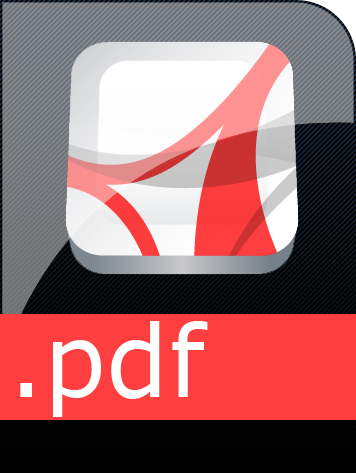
<style>
.page{position:relative;width:356px;height:473px;background:#ff3f3f}
.page>*{position:absolute;margin:0}
.t1{font:100px "Verdana";color:#ffffff}
</style>
<div class="page">
<p class="t1" style="left:20px;top:321px;width:188px;height:96px">.pdf</p>
</div>
